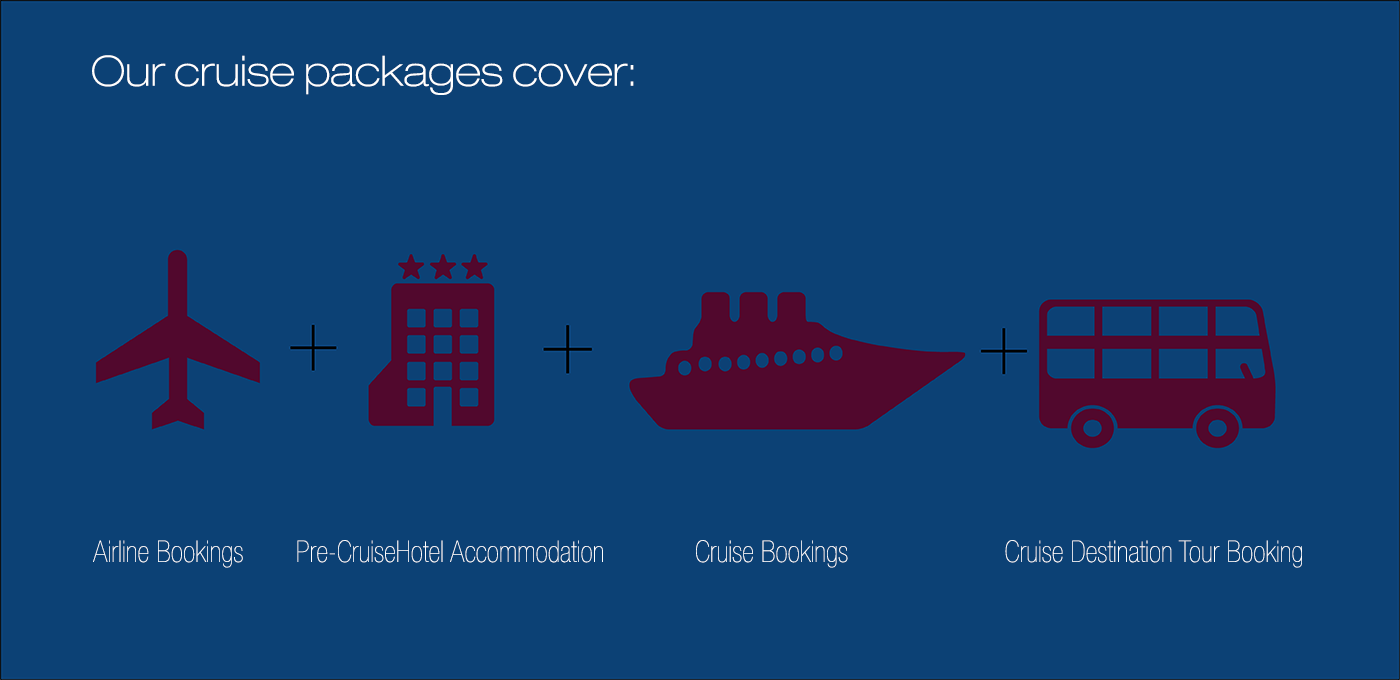
<style>
.page{position:relative;width:1400px;height:680px;background:#0c4175}
.page>*{position:absolute;margin:0}
.t1{font:41.7px "HelveticaNeueLTCom-ThEx";color:#ffffff}
.t2{font:30px "HelveticaNeueLTCom-UltLtCn";color:#ffffff}
</style>
<div class="page">
<p class="t1" style="left:92px;top:55px;width:542px;height:40px">Our cruise packages cover:</p>
<p class="t2" style="left:93px;top:540px;width:150px;height:28px">Airline Bookings</p>
<p class="t2" style="left:297px;top:540px;width:306px;height:23px">Pre-CruiseHotel Accommodation</p>
<p class="t2" style="left:696px;top:540px;width:152px;height:28px">Cruise Bookings</p>
<p class="t2" style="left:1005px;top:540px;width:297px;height:28px">Cruise Destination Tour Booking</p>
</div>
